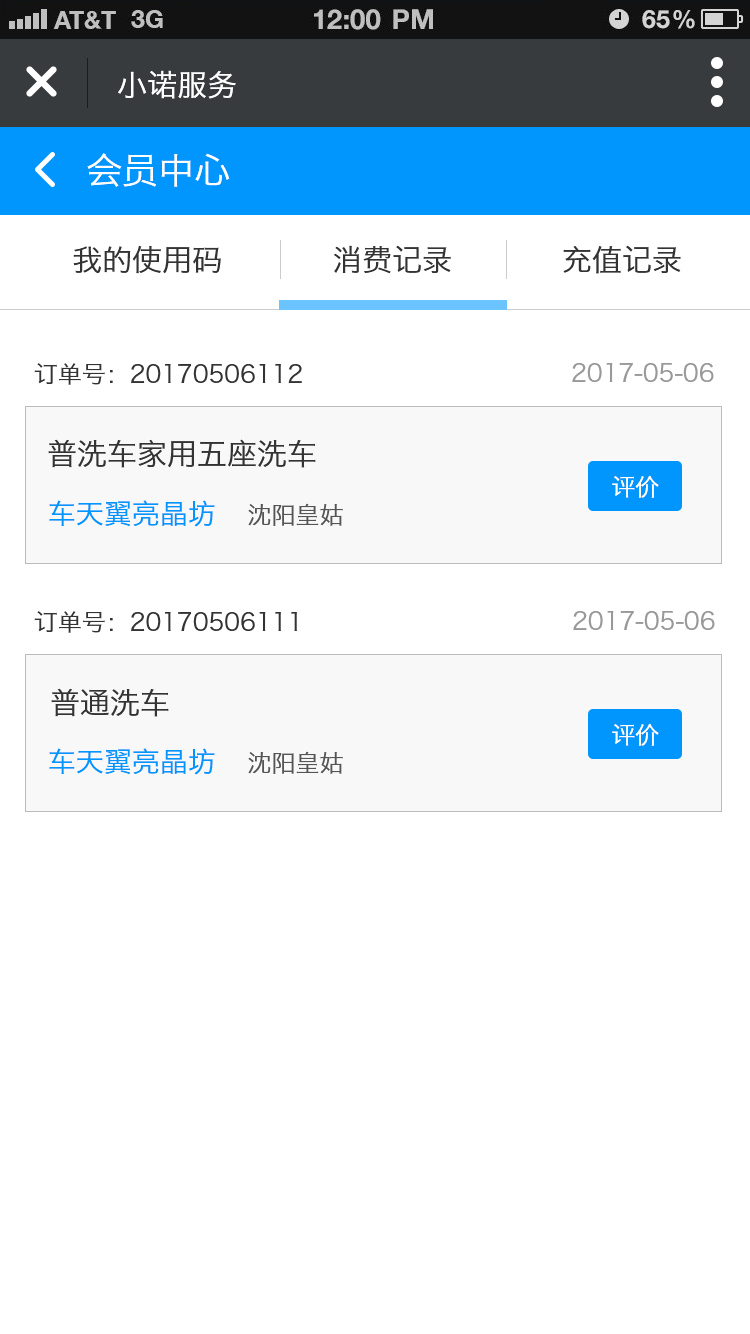
<style>
.page{position:relative;width:750px;height:1334px;background:#ffffff}
.page>*{position:absolute;margin:0}
.t1{font:30px "HiraginoSansGB-W3";color:#ffffff}
.t2{font:36px "HiraginoSansGB-W3";color:#ffffff}
.t3{font:30px "HiraginoSansGB-W3";color:#333333}
.t4{font:24px "HiraginoSansGB-W3";color:#333333}
.t5{font:24px "HiraginoSansGB-W3";color:#999999}
.t6{font:24px "HiraginoSansGB-W3";color:#ffffff}
.t7{font:28px "HiraginoSansGB-W3";color:#0096fd}
.t8{font:24px "HiraginoSansGB-W3";color:#555555}
</style>
<div class="page">
<p class="t1" style="left:118px;top:70px;width:118px;height:29px">小诺服务</p>
<p class="t2" style="left:87px;top:153px;width:143px;height:34px">会员中心</p>
<p class="t3" style="left:73px;top:245px;width:608px;height:29px">我的使用码           消费记录           充值记录</p>
<p class="t4" style="left:34px;top:363px;width:268px;height:22px">订单号：20170506112</p>
<p class="t5" style="left:572px;top:362px;width:142px;height:21px">2017-05-06</p>
<p class="t3" style="left:48px;top:439px;width:268px;height:29px">普洗车家用五座洗车</p>
<p class="t6" style="left:612px;top:475px;width:47px;height:23px">评价</p>
<p class="t7" style="left:49px;top:500px;width:294px;height:27px">车天翼亮晶坊<span class="t8">    沈阳皇姑</span></p>
<p class="t4" style="left:34px;top:611px;width:263px;height:22px">订单号：20170506111</p>
<p class="t5" style="left:573px;top:610px;width:142px;height:21px">2017-05-06</p>
<p class="t3" style="left:51px;top:688px;width:118px;height:29px">普通洗车</p>
<p class="t6" style="left:612px;top:723px;width:47px;height:23px">评价</p>
<p class="t7" style="left:49px;top:748px;width:294px;height:27px">车天翼亮晶坊<span class="t8">    沈阳皇姑</span></p>
</div>
